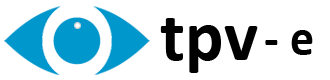
<style>
.page{position:relative;width:330px;height:80px;background:#ffffff}
.page>*{position:absolute;margin:0}
.t1{font:72px "Calibri-Bold";color:#000000}
.t2{font:48px "Calibri-Bold";color:#000000}
</style>
<div class="page">
<p class="t1" style="left:160px;top:18px;width:98px;height:55px">tpv</p>
<p class="t2" style="left:265px;top:30px;width:48px;height:25px">- e</p>
</div>
